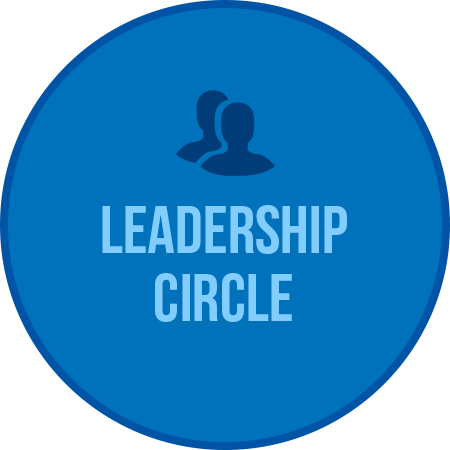
<style>
.page{position:relative;width:450px;height:450px;background:#0072bc}
.page>*{position:absolute;margin:0}
.t1{font:67.7px/67.9px "BebasNeueBold";color:#80cdfe}
</style>
<div class="page">
<p class="t1" style="left:102px;top:205px;width:245px;height:117px;text-align:center">leadership<br>circle</p>
</div>
